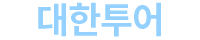
<style>
.page{position:relative;width:200px;height:40px;background:#ffffff}
.page>*{position:absolute;margin:0}
.t1{font:36px "NotoSansKR-Bold";letter-spacing:-0.025em;color:#95d1ff;text-transform:uppercase}
</style>
<div class="page">
<p class="t1" style="left:38px;top:2px;width:123px;height:35px">대한투어</p>
</div>
